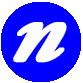
<style>
.page{position:relative;width:83px;height:83px;background:#0000ff}
.page>*{position:absolute;margin:0}
.t1{font:95px "AGaramondPro-BoldItalic";color:#fdfcfc;font-weight:bold;font-style:italic}
</style>
<div class="page">
<p class="t1" style="left:13px;top:22px;width:54px;height:41px">n</p>
</div>
